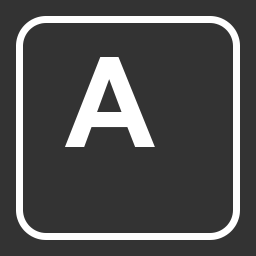
<style>
.page{position:relative;width:256px;height:256px;background:#333333}
.page>*{position:absolute;margin:0}
.t1{font:125px "Arial-BoldMT";color:#ffffff}
</style>
<div class="page">
<p class="t1" style="left:64px;top:57px;width:91px;height:90px">A</p>
</div>
